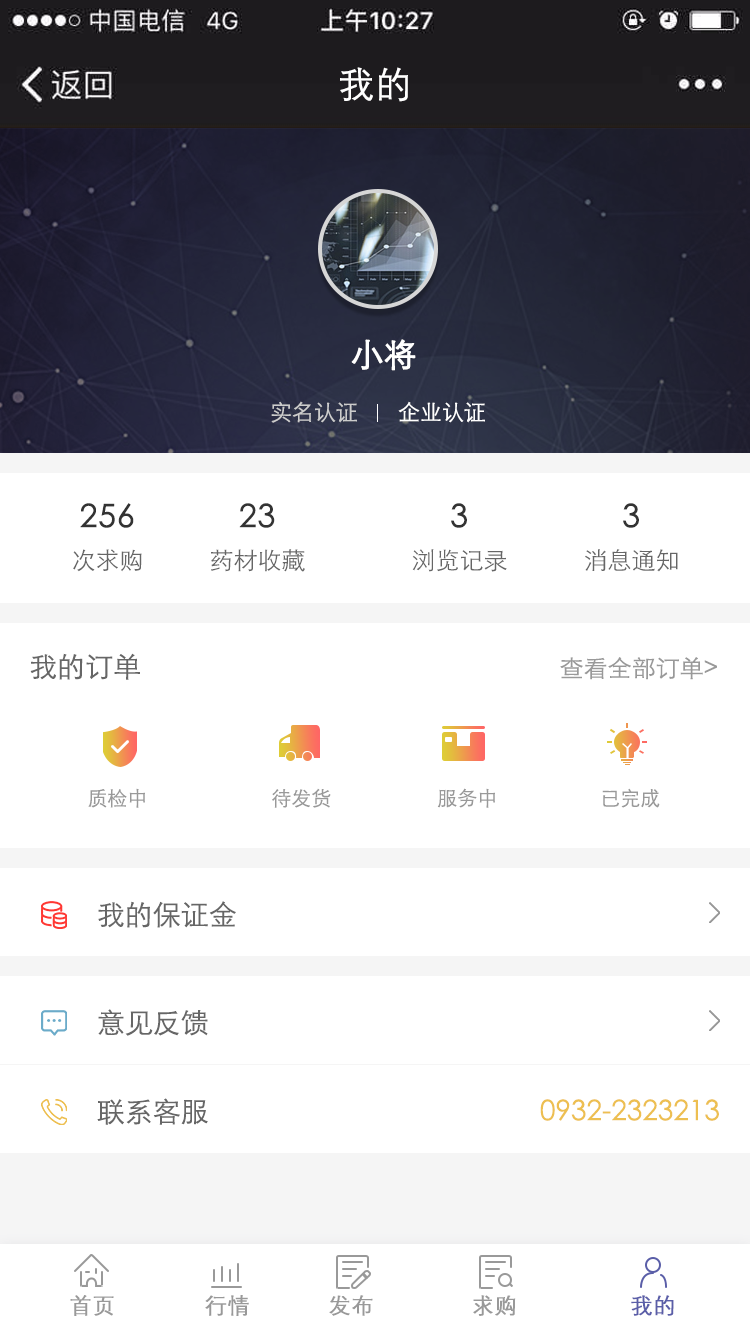
<style>
.page{position:relative;width:750px;height:1334px;background:#ffffff}
.page>*{position:absolute;margin:0}
.t1{font:36px "FZZDXJW--GB1-0";color:#ffffff;font-weight:bold}
.t2{font:32px "STXihei";color:#ffffff;font-weight:bold}
.t3{font:22px "STXihei";color:#cccccc}
.t4{font:22px "STXihei";color:#ffffff}
.t5{font:32px "STXihei";color:#333333;font-weight:bold}
.t6{font:24px "STXihei";color:#666666}
.t7{font:28px "STXihei";color:#666666}
.t8{font:24px "STXihei";color:#999999}
.t9{font:20px "STXihei";color:#999999}
.t10{font:28px "STXihei";color:#edbf51}
.t11{font:22px "FZZDXJW--GB1-0";color:#999999;font-weight:bold}
.t12{font:22px "FZZDXJW--GB1-0";color:#5a5ea8;font-weight:bold}
</style>
<div class="page">
<p class="t1" style="left:340px;top:67px;width:68px;height:35px">我的</p>
<p class="t2" style="left:351px;top:339px;width:65px;height:32px">小将</p>
<p class="t3" style="left:271px;top:401px;width:86px;height:22px">实名认证</p>
<p class="t4" style="left:398px;top:401px;width:87px;height:22px">企业认证</p>
<p class="t5" style="left:80px;top:503px;width:54px;height:25px">256</p>
<p class="t5" style="left:239px;top:503px;width:36px;height:25px">23</p>
<p class="t5" style="left:451px;top:503px;width:16px;height:25px">3</p>
<p class="t5" style="left:623px;top:503px;width:16px;height:25px">3</p>
<p class="t6" style="left:73px;top:549px;width:69px;height:23px">次求购</p>
<p class="t6" style="left:211px;top:549px;width:94px;height:23px">药材收藏</p>
<p class="t6" style="left:412px;top:549px;width:95px;height:23px">浏览记录</p>
<p class="t6" style="left:585px;top:549px;width:93px;height:23px">消息通知</p>
<p class="t7" style="left:30px;top:653px;width:110px;height:27px">我的订单</p>
<p class="t8" style="left:560px;top:657px;width:157px;height:23px">查看全部订单&gt;</p>
<p class="t9" style="left:88px;top:788px;width:57px;height:20px">质检中</p>
<p class="t9" style="left:272px;top:788px;width:59px;height:20px">待发货</p>
<p class="t9" style="left:437px;top:788px;width:58px;height:20px">服务中</p>
<p class="t9" style="left:602px;top:788px;width:58px;height:20px">已完成</p>
<p class="t7" style="left:98px;top:901px;width:138px;height:27px">我的保证金</p>
<p class="t7" style="left:98px;top:1009px;width:110px;height:27px">意见反馈</p>
<p class="t7" style="left:97px;top:1098px;width:111px;height:27px">联系客服</p>
<p class="t10" style="left:540px;top:1099px;width:179px;height:22px">0932-2323213</p>
<p class="t11" style="left:70px;top:1295px;width:44px;height:21px">首页</p>
<p class="t11" style="left:205px;top:1295px;width:44px;height:21px">行情</p>
<p class="t11" style="left:329px;top:1295px;width:44px;height:21px">发布</p>
<p class="t11" style="left:473px;top:1295px;width:43px;height:21px">求购</p>
<p class="t12" style="left:631px;top:1295px;width:43px;height:21px">我的</p>
</div>
